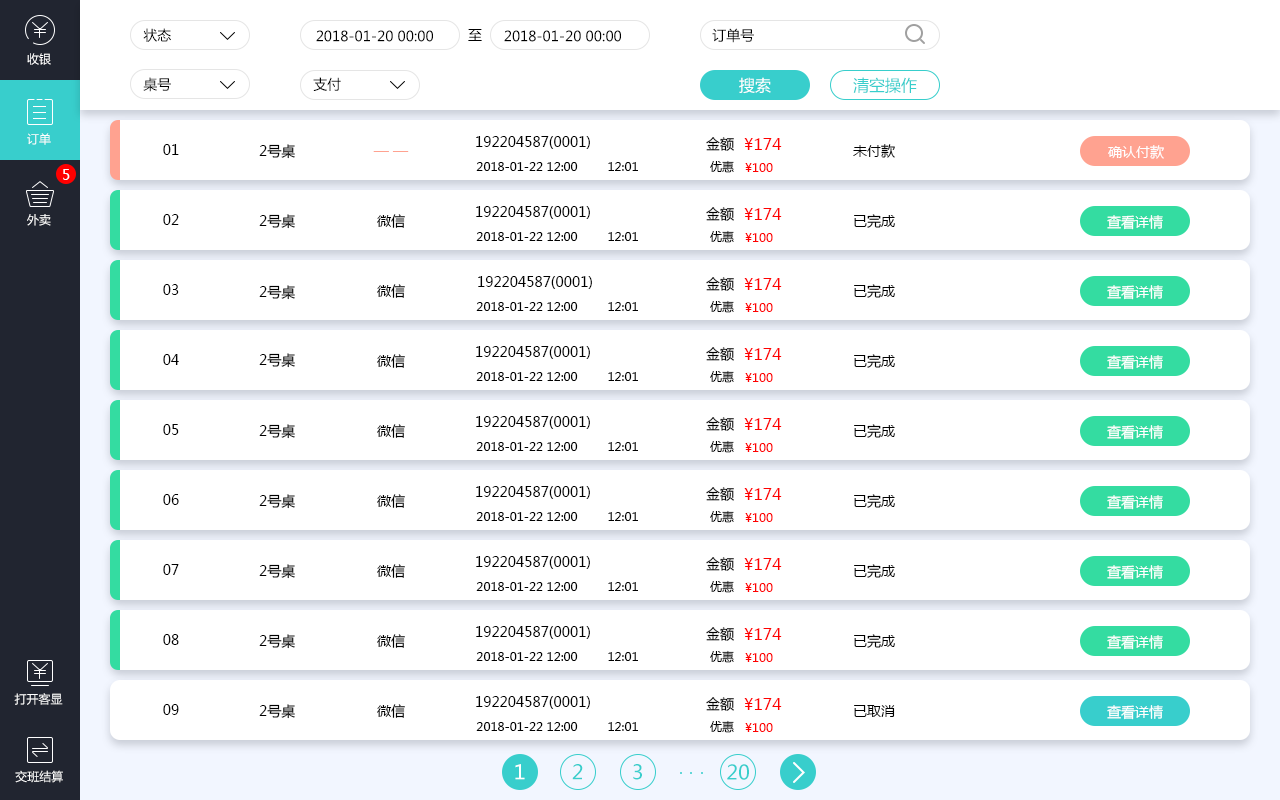
<style>
.page{position:relative;width:1280px;height:800px;background:#ffffff}
.page>*{position:absolute;margin:0}
.t1{font:14px "MicrosoftYaHei";color:#000000}
.t2{font:12px "MicrosoftYaHei";color:#ffffff}
.t3{font:16px "MicrosoftYaHei";color:#ffffff}
.t4{font:16px "MicrosoftYaHei";color:#38cecc}
.t5{font:16px "MicrosoftYaHei";color:#ff0000}
.t6{font:14px "MicrosoftYaHei";color:#ffffff}
.t7{font:14px "MicrosoftYaHei";color:#ffa290}
.t8{font:12px "MicrosoftYaHei";color:#000000}
.t9{font:12px "MicrosoftYaHei";color:#ff0000}
.t10{font:20px "MicrosoftYaHei";color:#ffffff}
.t11{font:20px "MicrosoftYaHei";color:#38cecc}
</style>
<div class="page">
<p class="t1" style="left:143px;top:28px;width:28px;height:14px">状态</p>
<p class="t1" style="left:316px;top:30px;width:117px;height:12px">2018-01-20 00:00</p>
<p class="t1" style="left:468px;top:29px;width:14px;height:12px">至</p>
<p class="t1" style="left:504px;top:30px;width:117px;height:12px">2018-01-20 00:00</p>
<p class="t1" style="left:712px;top:28px;width:42px;height:15px">订单号</p>
<p class="t2" style="left:27px;top:53px;width:24px;height:12px">收银</p>
<p class="t1" style="left:143px;top:77px;width:28px;height:15px">桌号</p>
<p class="t1" style="left:313px;top:77px;width:28px;height:14px">支付</p>
<p class="t3" style="left:739px;top:77px;width:32px;height:17px">搜索</p>
<p class="t4" style="left:853px;top:77px;width:64px;height:16px">清空操作</p>
<p class="t2" style="left:27px;top:133px;width:24px;height:12px">订单</p>
<p class="t1" style="left:476px;top:136px;width:114px;height:13px">192204587(0001)</p>
<p class="t1" style="left:706px;top:137px;width:28px;height:14px">金额</p>
<p class="t1" style="left:163px;top:144px;width:16px;height:11px">01</p>
<p class="t1" style="left:259px;top:144px;width:36px;height:15px">2号桌</p>
<p class="t5" style="left:744px;top:138px;width:38px;height:12px">¥174</p>
<p class="t1" style="left:853px;top:144px;width:42px;height:14px">未付款</p>
<p class="t6" style="left:1108px;top:145px;width:56px;height:14px">确认付款</p>
<p class="t7" style="left:373px;top:151px;width:36px;height:1px">— —</p>
<p class="t8" style="left:710px;top:160px;width:24px;height:13px">优惠</p>
<p class="t6" style="left:63px;top:169px;width:7px;height:11px">5</p>
<p class="t8" style="left:476px;top:162px;width:102px;height:9px">2018-01-22 12:00</p>
<p class="t8" style="left:608px;top:162px;width:30px;height:9px">12:01</p>
<p class="t9" style="left:745px;top:163px;width:28px;height:9px">¥100</p>
<p class="t1" style="left:476px;top:206px;width:114px;height:13px">192204587(0001)</p>
<p class="t1" style="left:706px;top:207px;width:28px;height:14px">金额</p>
<p class="t5" style="left:744px;top:208px;width:38px;height:12px">¥174</p>
<p class="t2" style="left:27px;top:214px;width:24px;height:12px">外卖</p>
<p class="t1" style="left:163px;top:214px;width:16px;height:11px">02</p>
<p class="t1" style="left:259px;top:214px;width:36px;height:15px">2号桌</p>
<p class="t1" style="left:377px;top:214px;width:28px;height:14px">微信</p>
<p class="t1" style="left:854px;top:214px;width:41px;height:14px">已完成</p>
<p class="t6" style="left:1107px;top:215px;width:56px;height:15px">查看详情</p>
<p class="t8" style="left:476px;top:232px;width:102px;height:9px">2018-01-22 12:00</p>
<p class="t8" style="left:608px;top:232px;width:30px;height:9px">12:01</p>
<p class="t8" style="left:710px;top:230px;width:24px;height:13px">优惠</p>
<p class="t9" style="left:745px;top:233px;width:28px;height:9px">¥100</p>
<p class="t1" style="left:478px;top:276px;width:114px;height:13px">192204587(0001)</p>
<p class="t1" style="left:706px;top:277px;width:28px;height:14px">金额</p>
<p class="t5" style="left:744px;top:278px;width:38px;height:12px">¥174</p>
<p class="t1" style="left:163px;top:284px;width:16px;height:11px">03</p>
<p class="t1" style="left:259px;top:285px;width:36px;height:15px">2号桌</p>
<p class="t1" style="left:377px;top:284px;width:28px;height:14px">微信</p>
<p class="t1" style="left:854px;top:284px;width:41px;height:14px">已完成</p>
<p class="t6" style="left:1107px;top:285px;width:56px;height:15px">查看详情</p>
<p class="t8" style="left:476px;top:302px;width:102px;height:9px">2018-01-22 12:00</p>
<p class="t8" style="left:608px;top:302px;width:30px;height:9px">12:01</p>
<p class="t8" style="left:710px;top:300px;width:24px;height:13px">优惠</p>
<p class="t9" style="left:745px;top:303px;width:28px;height:9px">¥100</p>
<p class="t1" style="left:259px;top:353px;width:36px;height:15px">2号桌</p>
<p class="t1" style="left:476px;top:346px;width:114px;height:13px">192204587(0001)</p>
<p class="t1" style="left:706px;top:347px;width:28px;height:14px">金额</p>
<p class="t5" style="left:744px;top:348px;width:38px;height:12px">¥174</p>
<p class="t1" style="left:163px;top:354px;width:16px;height:11px">04</p>
<p class="t1" style="left:377px;top:354px;width:28px;height:14px">微信</p>
<p class="t1" style="left:854px;top:354px;width:41px;height:14px">已完成</p>
<p class="t6" style="left:1107px;top:355px;width:56px;height:15px">查看详情</p>
<p class="t8" style="left:476px;top:372px;width:102px;height:9px">2018-01-22 12:00</p>
<p class="t8" style="left:608px;top:372px;width:30px;height:9px">12:01</p>
<p class="t8" style="left:710px;top:370px;width:24px;height:13px">优惠</p>
<p class="t9" style="left:745px;top:373px;width:28px;height:9px">¥100</p>
<p class="t1" style="left:163px;top:424px;width:16px;height:11px">05</p>
<p class="t1" style="left:259px;top:424px;width:36px;height:15px">2号桌</p>
<p class="t1" style="left:377px;top:424px;width:28px;height:14px">微信</p>
<p class="t1" style="left:476px;top:416px;width:114px;height:13px">192204587(0001)</p>
<p class="t1" style="left:706px;top:417px;width:28px;height:14px">金额</p>
<p class="t5" style="left:744px;top:418px;width:38px;height:12px">¥174</p>
<p class="t1" style="left:854px;top:424px;width:41px;height:14px">已完成</p>
<p class="t6" style="left:1107px;top:425px;width:56px;height:15px">查看详情</p>
<p class="t8" style="left:476px;top:442px;width:102px;height:9px">2018-01-22 12:00</p>
<p class="t8" style="left:608px;top:442px;width:30px;height:9px">12:01</p>
<p class="t8" style="left:710px;top:440px;width:24px;height:13px">优惠</p>
<p class="t9" style="left:745px;top:443px;width:28px;height:9px">¥100</p>
<p class="t1" style="left:476px;top:486px;width:114px;height:13px">192204587(0001)</p>
<p class="t1" style="left:163px;top:494px;width:16px;height:11px">06</p>
<p class="t1" style="left:259px;top:494px;width:36px;height:15px">2号桌</p>
<p class="t1" style="left:377px;top:494px;width:28px;height:14px">微信</p>
<p class="t1" style="left:706px;top:487px;width:28px;height:14px">金额</p>
<p class="t5" style="left:744px;top:488px;width:38px;height:12px">¥174</p>
<p class="t1" style="left:854px;top:494px;width:41px;height:14px">已完成</p>
<p class="t6" style="left:1107px;top:495px;width:56px;height:15px">查看详情</p>
<p class="t8" style="left:710px;top:510px;width:24px;height:13px">优惠</p>
<p class="t8" style="left:476px;top:512px;width:102px;height:9px">2018-01-22 12:00</p>
<p class="t8" style="left:608px;top:512px;width:30px;height:9px">12:01</p>
<p class="t9" style="left:745px;top:513px;width:28px;height:9px">¥100</p>
<p class="t1" style="left:476px;top:556px;width:114px;height:13px">192204587(0001)</p>
<p class="t1" style="left:706px;top:557px;width:28px;height:14px">金额</p>
<p class="t5" style="left:744px;top:558px;width:38px;height:12px">¥174</p>
<p class="t1" style="left:163px;top:564px;width:16px;height:11px">07</p>
<p class="t1" style="left:259px;top:564px;width:36px;height:15px">2号桌</p>
<p class="t1" style="left:377px;top:564px;width:28px;height:14px">微信</p>
<p class="t1" style="left:854px;top:564px;width:41px;height:14px">已完成</p>
<p class="t6" style="left:1107px;top:565px;width:56px;height:15px">查看详情</p>
<p class="t8" style="left:476px;top:582px;width:102px;height:9px">2018-01-22 12:00</p>
<p class="t8" style="left:608px;top:582px;width:30px;height:9px">12:01</p>
<p class="t8" style="left:710px;top:580px;width:24px;height:13px">优惠</p>
<p class="t9" style="left:745px;top:583px;width:28px;height:9px">¥100</p>
<p class="t1" style="left:476px;top:626px;width:114px;height:13px">192204587(0001)</p>
<p class="t1" style="left:706px;top:627px;width:28px;height:14px">金额</p>
<p class="t5" style="left:744px;top:628px;width:38px;height:12px">¥174</p>
<p class="t1" style="left:163px;top:634px;width:16px;height:11px">08</p>
<p class="t1" style="left:259px;top:634px;width:36px;height:15px">2号桌</p>
<p class="t1" style="left:377px;top:634px;width:28px;height:14px">微信</p>
<p class="t1" style="left:854px;top:634px;width:41px;height:14px">已完成</p>
<p class="t6" style="left:1107px;top:635px;width:56px;height:15px">查看详情</p>
<p class="t8" style="left:476px;top:652px;width:102px;height:9px">2018-01-22 12:00</p>
<p class="t8" style="left:608px;top:652px;width:30px;height:9px">12:01</p>
<p class="t8" style="left:710px;top:650px;width:24px;height:13px">优惠</p>
<p class="t9" style="left:745px;top:653px;width:28px;height:9px">¥100</p>
<p class="t2" style="left:14px;top:693px;width:49px;height:12px">打开客显</p>
<p class="t1" style="left:476px;top:696px;width:114px;height:13px">192204587(0001)</p>
<p class="t1" style="left:706px;top:697px;width:28px;height:14px">金额</p>
<p class="t5" style="left:744px;top:698px;width:38px;height:12px">¥174</p>
<p class="t1" style="left:163px;top:704px;width:16px;height:11px">09</p>
<p class="t1" style="left:259px;top:704px;width:36px;height:15px">2号桌</p>
<p class="t1" style="left:377px;top:704px;width:28px;height:14px">微信</p>
<p class="t1" style="left:854px;top:705px;width:41px;height:12px">已取消</p>
<p class="t6" style="left:1107px;top:705px;width:56px;height:15px">查看详情</p>
<p class="t8" style="left:476px;top:722px;width:102px;height:9px">2018-01-22 12:00</p>
<p class="t8" style="left:608px;top:722px;width:30px;height:9px">12:01</p>
<p class="t8" style="left:710px;top:720px;width:24px;height:13px">优惠</p>
<p class="t9" style="left:745px;top:723px;width:28px;height:9px">¥100</p>
<p class="t2" style="left:15px;top:770px;width:48px;height:13px">交班结算</p>
<p class="t10" style="left:515px;top:764px;width:10px;height:16px">1</p>
<p class="t11" style="left:572px;top:764px;width:11px;height:16px">2</p>
<p class="t11" style="left:633px;top:764px;width:9px;height:16px">3</p>
<p class="t11" style="left:727px;top:764px;width:22px;height:16px">20</p>
</div>
